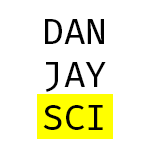
<style>
.page{position:relative;width:150px;height:150px;background:#ffffff}
.page>*{position:absolute;margin:0}
.t1{font:36px "FiraMonoOT";color:#000000}
</style>
<div class="page">
<p class="t1" style="left:43px;top:19px;width:63px;height:111px;text-align:center">DAN<br>JAY<br>SCI</p>
</div>
